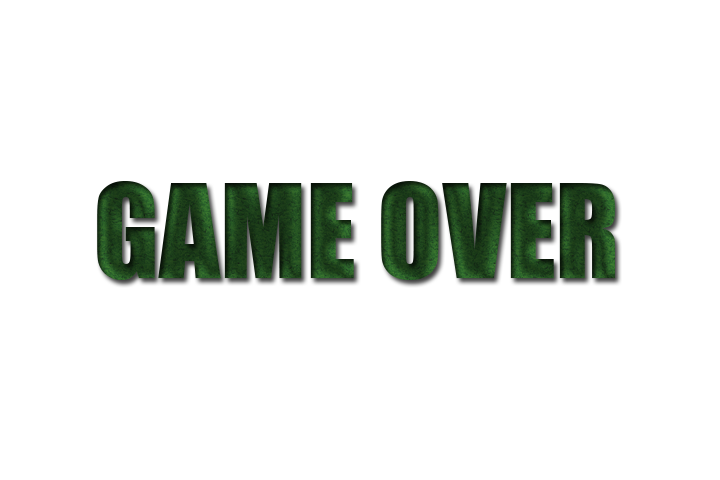
<style>
.page{position:relative;width:720px;height:480px;background:#ffffff}
.page>*{position:absolute;margin:0}
.t1{font:120px "Impact";color:#1d401b}
</style>
<div class="page">
<p class="t1" style="left:97px;top:181px;width:518px;height:99px;text-align:center">GAME OVER<br><br>G</p>
</div>
